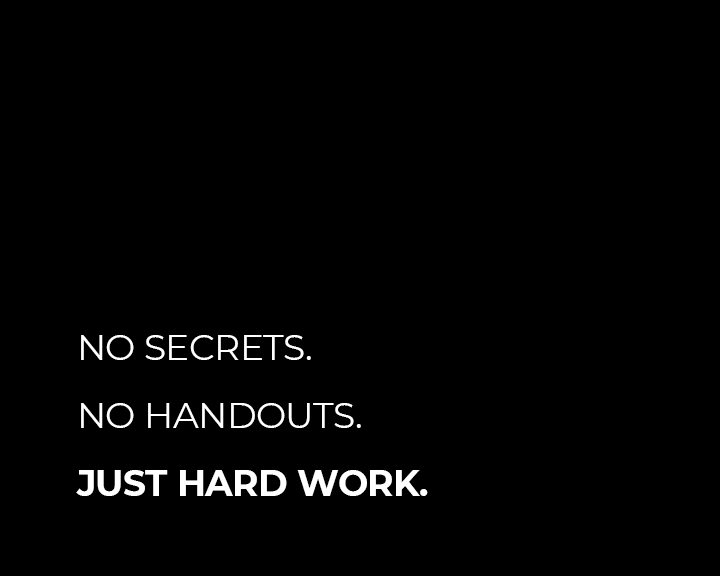
<style>
.page{position:relative;width:720px;height:576px;background:#000000}
.page>*{position:absolute;margin:0}
.t1{font:36px/34px "Montserrat-Regular";letter-spacing:-0.015em;color:#ffffff}
.t2{font:36px/34px "Montserrat-Bold";letter-spacing:-0.015em;color:#ffffff}
</style>
<div class="page">
<p class="t1" style="left:76px;top:335px;width:352px;height:161px">NO SECRETS.<br><br>NO HANDOUTS.<br><br><span class="t2">JUST HARD WORK.</span></p>
</div>
